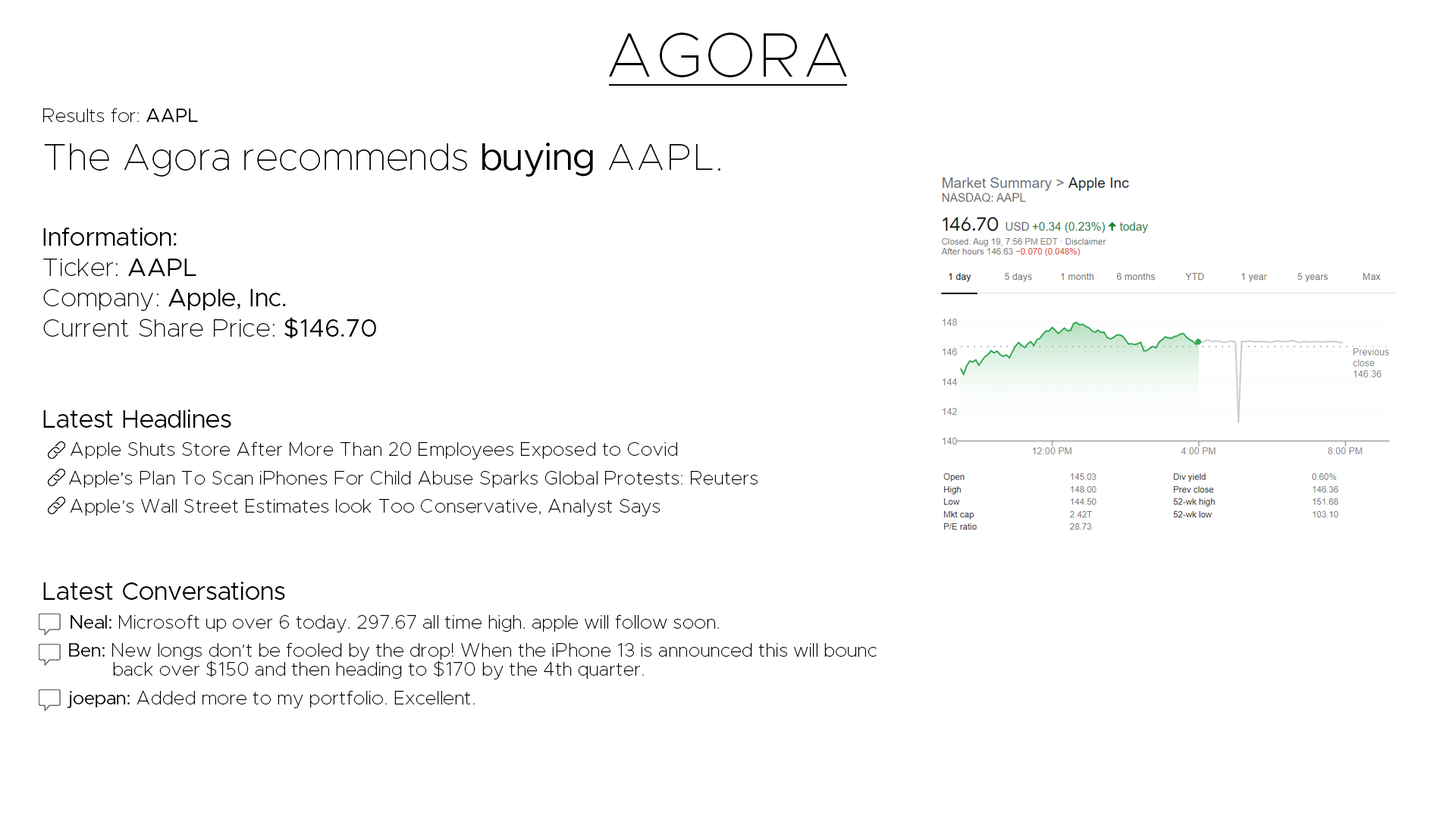
<style>
.page{position:relative;width:1456px;height:819px;background:#ffffff}
.page>*{position:absolute;margin:0}
.t1{font:63px "Metropolis-Thin";color:#000000}
.t2{font:19px "Metropolis-Thin";color:#000000}
.t3{font:19px "Metropolis-Regular";color:#000000}
.t4{font:19px/28.4px "Metropolis-Thin";color:#000000}
.t5{font:37.9px "Metropolis-Thin";color:#000000}
.t6{font:37.9px "Metropolis-Regular";color:#000000}
.t7{font:25.3px "Metropolis-Regular";color:#000000}
.t8{font:25.3px "Metropolis-Thin";color:#000000}
.t9{font:19px/28.4px "Metropolis-Regular";color:#000000}
.t10{font:19px/19px "Metropolis-Regular";color:#000000}
.t11{font:19px/19px "Metropolis-Thin";color:#000000}
</style>
<div class="page">
<p class="t1" style="left:609px;top:33px;width:238px;height:44px">AGORA</p>
<p class="t2" style="left:43px;top:108px;width:155px;height:14px">Results for: <span class="t3">AAPL</span></p>
<p class="t4" style="left:43px;top:143px;width:834px;height:565px"><span class="t5">The Agora recommends </span><span class="t6">buying</span><span class="t5"> AAPL.<br><br></span><span class="t7">Information:<br></span><span class="t8">Ticker: </span><span class="t7">AAPL<br></span><span class="t8">Company: </span><span class="t7">Apple, Inc.<br></span><span class="t8">Current Share Price: </span><span class="t7">$146.70<br><br><br>Latest Headlines<br>    </span>Apple Shuts Store After More Than 20 Employees Exposed to Covid<br>     Apple's Plan To Scan iPhones For Child Abuse Sparks Global Protests: Reuters<br> Apple’s Wall Street Estimates look Too Conservative, Analyst Says<br><br><br><span class="t7">Latest Conversations<br>    </span><span class="t9">Neal:</span> Microsoft up over 6 today. 297.67 all time high. apple will follow soon.<br>     <span class="t10">Ben:</span><span class="t11"> New longs don’t be fooled by the drop! When the iPhone 13 is announced this will bounc<br>     back over $150 and then heading to $170 by the 4th quarter.<br></span><span class="t9"> joepan: </span>Added more to my portfolio. Excellent.</p>
</div>
